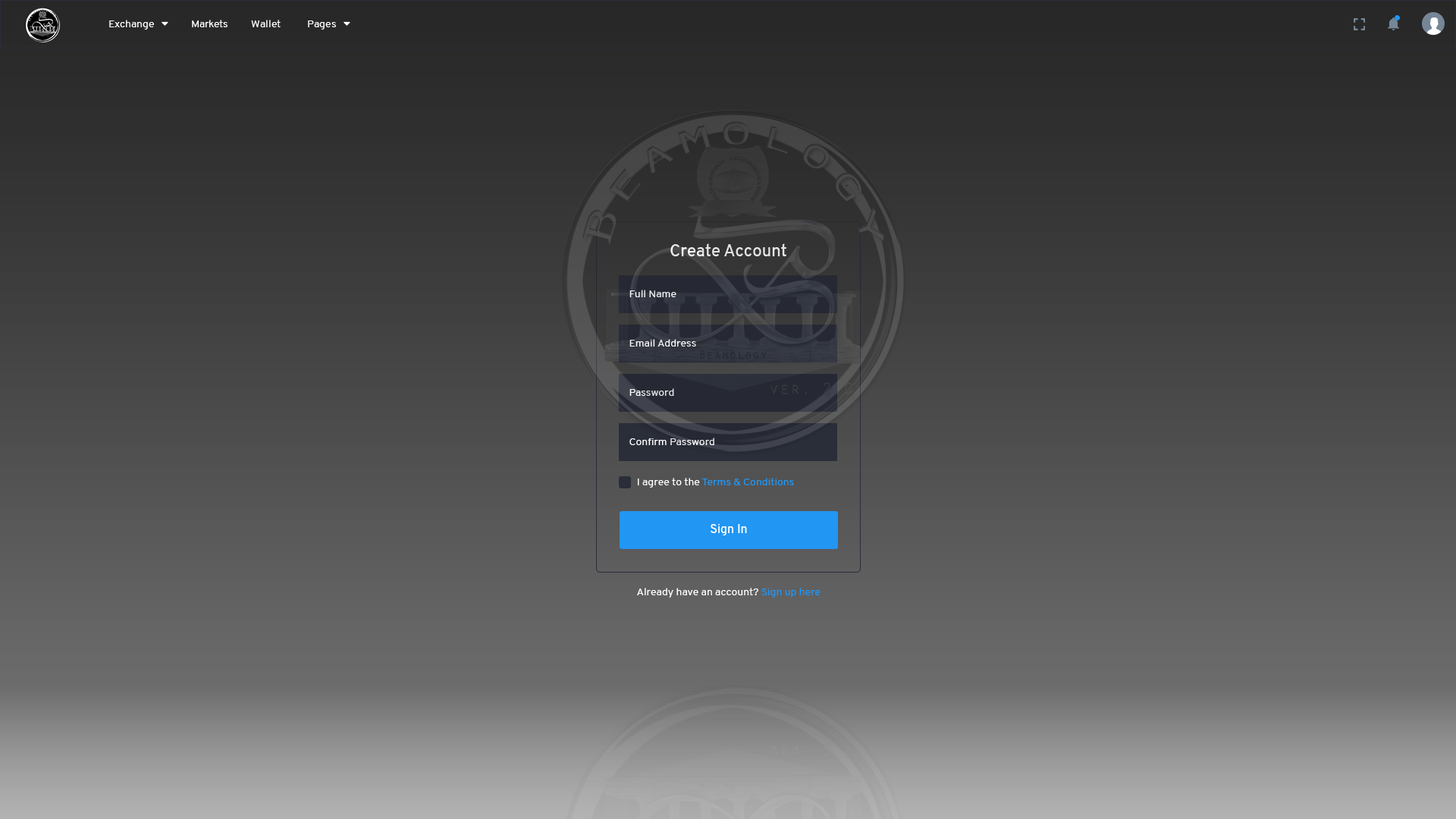
<style>
.page{position:relative;width:1456px;height:819px}
.page>*{position:absolute;margin:0}
.t1{font:16.7px "Overpass-SemiBold";color:#e5e5e5}
.t2{font:10.6px "Overpass-Regular";color:#ffffff}
.t3{font:10.6px "Overpass-Regular";color:#e5e5e5}
.t4{font:10.6px "Overpass-Regular";color:#2196f3}
.t5{font:12.1px "Overpass-SemiBold";color:#ffffff}
</style>
<div class="page">
<p class="t1" style="left:670px;top:243px;width:116px;height:13px">Create Account</p>
<p class="t2" style="left:629px;top:290px;width:47px;height:7px">Full Name</p>
<p class="t2" style="left:629px;top:339px;width:67px;height:8px">Email Address</p>
<p class="t3" style="left:629px;top:388px;width:45px;height:8px">Password</p>
<p class="t2" style="left:629px;top:438px;width:85px;height:7px">Confirm Password</p>
<p class="t4" style="left:638px;top:478px;width:156px;height:10px"><span class="t2">I agree to the </span>Terms &amp; Conditions</p>
<p class="t5" style="left:711px;top:524px;width:36px;height:12px">Sign In</p>
<p class="t2" style="left:637px;top:588px;width:184px;height:10px">Already have an account? <span class="t4">Sign up here</span></p>
</div>
